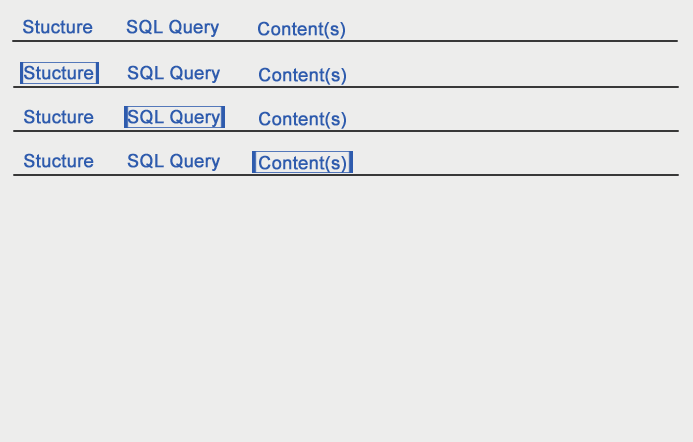
<style>
.page{position:relative;width:693px;height:442px;background:#ededec}
.page>*{position:absolute;margin:0}
.t1{font:18px "ArialMT";color:#2e5bad;font-weight:bold}
</style>
<div class="page">
<p class="t1" style="left:23px;top:19px;width:196px;height:18px">Stucture      SQL Query</p>
<p class="t1" style="left:258px;top:21px;width:87px;height:18px">Content(s)</p>
</div>
